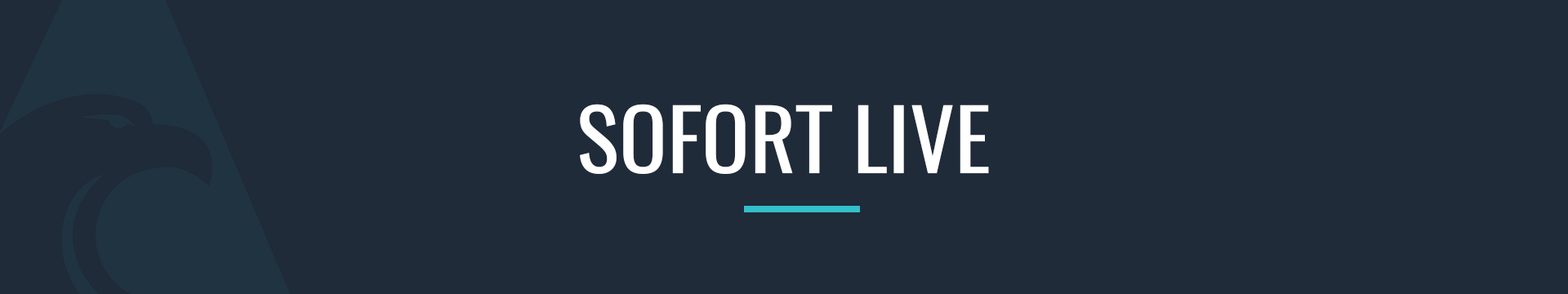
<style>
.page{position:relative;width:1568px;height:294px;background:#1f2b39}
.page>*{position:absolute;margin:0}
.t1{font:83.8px "Oswald-Regular";color:#ffffff;text-transform:uppercase;scale:1.06 1}
</style>
<div class="page">
<p class="t1" style="left:580px;top:104px;width:409px;height:70px">sofort live</p>
</div>
